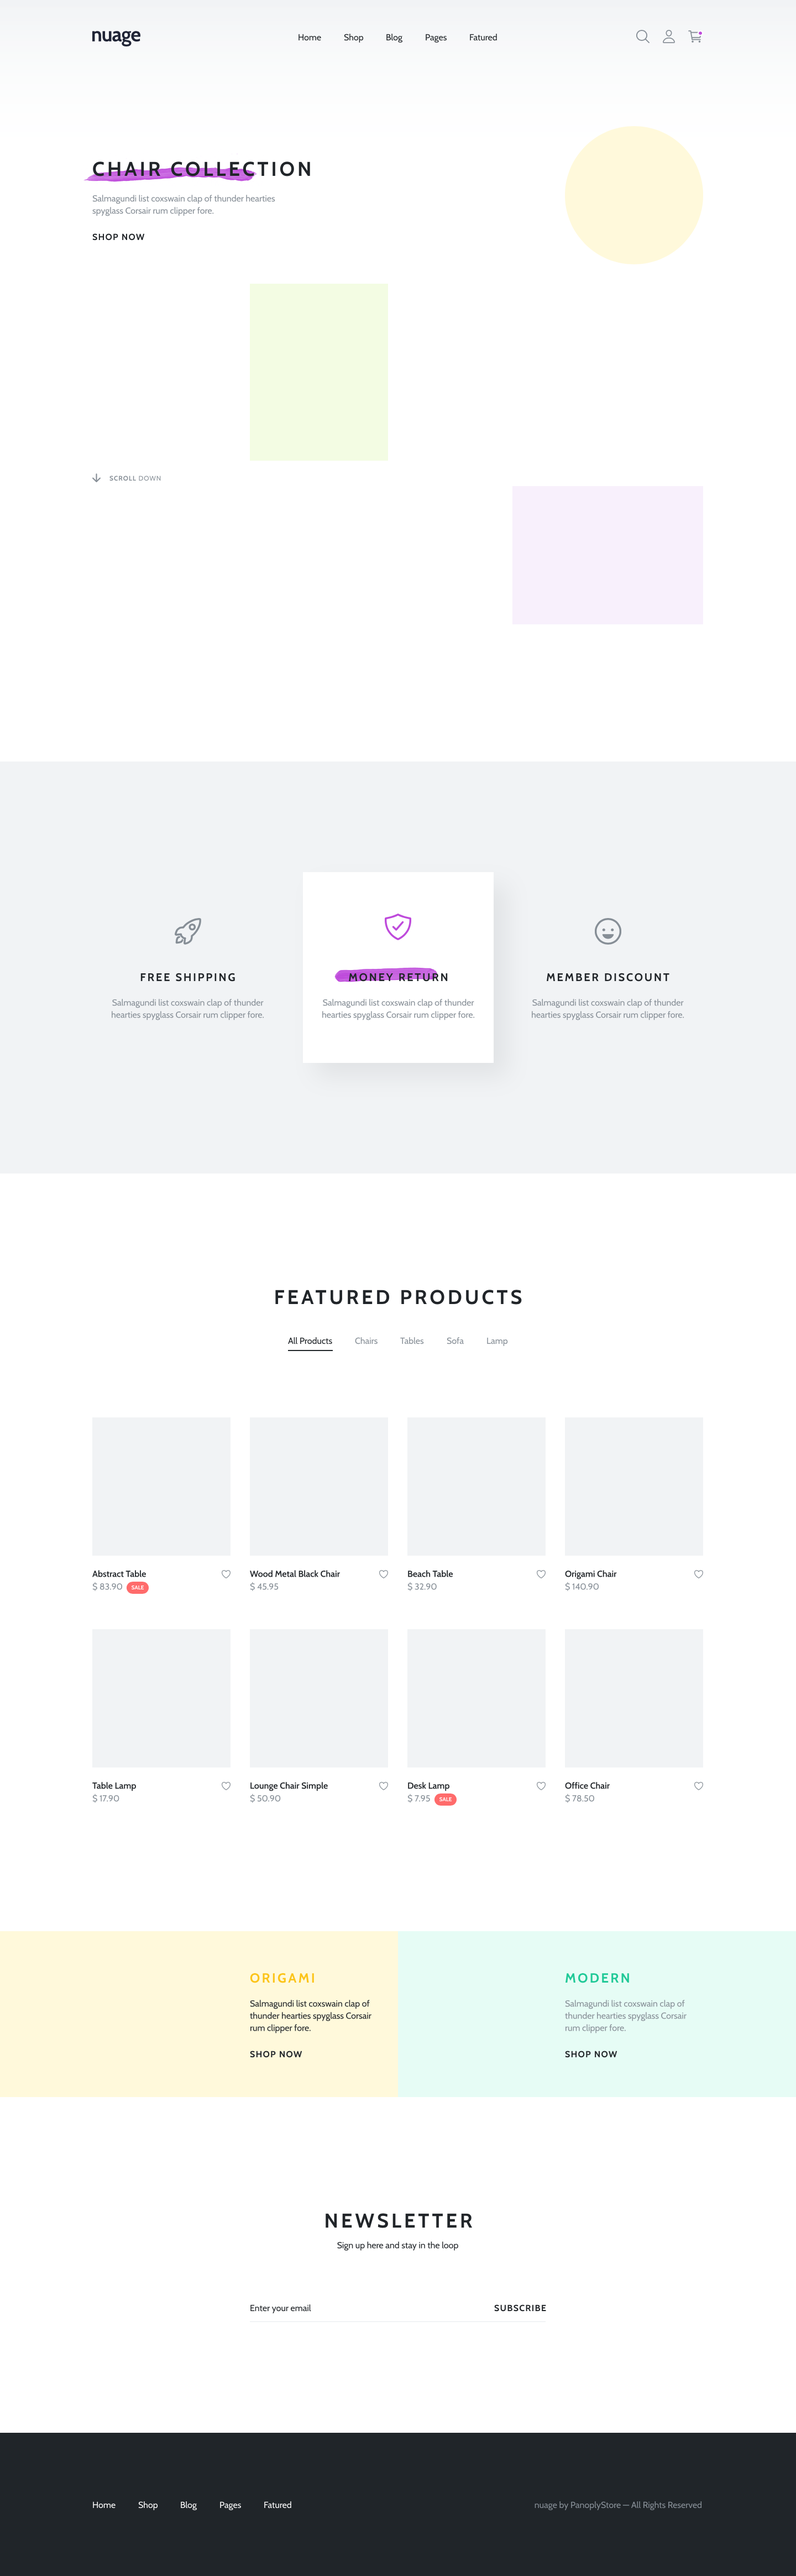
<style>
.page{position:relative;width:796px;height:2576px;background:#ffffff}
.page>*{position:absolute;margin:0}
.t1{font:8.8px "Cabin-Regular";color:#212529}
.t2{font:19.9px "Cabin-Bold";letter-spacing:0.139em;color:#212529}
.t3{font:8.8px/12.2px "Cabin-Regular";color:#868e96}
.t4{font:8.8px "Cabin-Bold";letter-spacing:0.083em;color:#212529}
.t5{font:6.6px "Cabin-Bold";letter-spacing:0.083em;color:#868e96}
.t6{font:6.6px "Cabin-Regular";letter-spacing:0.083em;color:#868e96}
.t7{font:11.1px "Cabin-Bold";letter-spacing:0.139em;color:#212529}
.t8{font:8.8px "Cabin-Regular";color:#868e96}
.t9{font:8.8px "Cabin-SemiBold";color:#212529}
.t10{font:5.5px "Cabin-Bold";color:#ffffff}
.t11{font:13.3px "Cabin-Bold";letter-spacing:0.139em;color:#fcc419}
.t12{font:13.3px "Cabin-Bold";letter-spacing:0.139em;color:#20c997}
.t13{font:8.8px/12.2px "Cabin-Regular";color:#212529}
.t14{font:8.8px "Cabin-Regular";color:#ffffff}
</style>
<div class="page">
<p class="t1" style="left:299px;top:34px;width:22px;height:7px">Home</p>
<p class="t1" style="left:344px;top:34px;width:20px;height:9px">Shop</p>
<p class="t1" style="left:387px;top:34px;width:16px;height:9px">Blog</p>
<p class="t1" style="left:426px;top:34px;width:21px;height:9px">Pages</p>
<p class="t1" style="left:470px;top:34px;width:27px;height:7px">Fatured</p>
<p class="t2" style="left:93px;top:161px;width:217px;height:15px">CHAIR COLLECTION</p>
<p class="t3" style="left:92px;top:195px;width:183px;height:21px">Salmagundi list coxswain clap of thunder hearties spyglass Corsair rum clipper fore.</p>
<p class="t4" style="left:92px;top:233px;width:53px;height:8px">SHOP NOW</p>
<p class="t5" style="left:109px;top:476px;width:52px;height:5px">SCROLL <span class="t6">DOWN</span></p>
<p class="t7" style="left:140px;top:973px;width:95px;height:9px">FREE SHIPPING</p>
<p class="t7" style="left:349px;top:973px;width:99px;height:9px">MONEY RETURN</p>
<p class="t7" style="left:547px;top:973px;width:123px;height:9px">MEMBER DISCOUNT</p>
<p class="t3" style="left:112px;top:999px;width:152px;height:21px;text-align:center">Salmagundi list coxswain clap of thunder hearties spyglass Corsair rum clipper fore.</p>
<p class="t3" style="left:322px;top:999px;width:153px;height:21px;text-align:center">Salmagundi list coxswain clap of thunder hearties spyglass Corsair rum clipper fore.</p>
<p class="t3" style="left:532px;top:999px;width:153px;height:21px;text-align:center">Salmagundi list coxswain clap of thunder hearties spyglass Corsair rum clipper fore.</p>
<p class="t2" style="left:275px;top:1290px;width:247px;height:15px">FEATURED PRODUCTS</p>
<p class="t1" style="left:288px;top:1337px;width:44px;height:7px">All Products</p>
<p class="t8" style="left:355px;top:1337px;width:23px;height:7px">Chairs</p>
<p class="t8" style="left:400px;top:1337px;width:24px;height:7px">Tables</p>
<p class="t8" style="left:447px;top:1337px;width:17px;height:7px">Sofa</p>
<p class="t8" style="left:487px;top:1337px;width:21px;height:9px">Lamp</p>
<p class="t9" style="left:92px;top:1570px;width:54px;height:7px">Abstract Table</p>
<p class="t9" style="left:250px;top:1570px;width:90px;height:7px">Wood Metal Black Chair</p>
<p class="t9" style="left:408px;top:1570px;width:45px;height:7px">Beach Table</p>
<p class="t9" style="left:565px;top:1570px;width:52px;height:9px">Origami Chair</p>
<p class="t8" style="left:92px;top:1582px;width:31px;height:9px">$ 83.90</p>
<p class="t10" style="left:132px;top:1585px;width:12px;height:5px">SALE</p>
<p class="t8" style="left:250px;top:1582px;width:29px;height:9px">$ 45.95</p>
<p class="t8" style="left:408px;top:1582px;width:29px;height:9px">$ 32.90</p>
<p class="t8" style="left:565px;top:1582px;width:34px;height:9px">$ 140.90</p>
<p class="t9" style="left:92px;top:1782px;width:44px;height:9px">Table Lamp</p>
<p class="t9" style="left:251px;top:1782px;width:77px;height:9px">Lounge Chair Simple</p>
<p class="t9" style="left:408px;top:1782px;width:42px;height:9px">Desk Lamp</p>
<p class="t9" style="left:565px;top:1782px;width:45px;height:7px">Office Chair</p>
<p class="t8" style="left:92px;top:1793px;width:27px;height:10px">$ 17.90</p>
<p class="t8" style="left:250px;top:1793px;width:31px;height:10px">$ 50.90</p>
<p class="t8" style="left:408px;top:1793px;width:22px;height:10px">$ 7.95</p>
<p class="t8" style="left:565px;top:1793px;width:30px;height:10px">$ 78.50</p>
<p class="t10" style="left:440px;top:1797px;width:12px;height:5px">SALE</p>
<p class="t11" style="left:250px;top:1973px;width:64px;height:10px">ORIGAMI</p>
<p class="t12" style="left:566px;top:1973px;width:63px;height:10px">MODERN</p>
<p class="t13" style="left:250px;top:2000px;width:122px;height:33px">Salmagundi list coxswain clap of thunder hearties spyglass Corsair rum clipper fore.</p>
<p class="t3" style="left:565px;top:2000px;width:122px;height:33px">Salmagundi list coxswain clap of thunder hearties spyglass Corsair rum clipper fore.</p>
<p class="t4" style="left:250px;top:2051px;width:53px;height:7px">SHOP NOW</p>
<p class="t4" style="left:565px;top:2051px;width:53px;height:7px">SHOP NOW</p>
<p class="t2" style="left:326px;top:2213px;width:147px;height:15px">NEWSLETTER</p>
<p class="t1" style="left:337px;top:2241px;width:121px;height:10px">Sign up here and stay in the loop</p>
<p class="t1" style="left:251px;top:2304px;width:60px;height:9px">Enter your email</p>
<p class="t4" style="left:494px;top:2304px;width:52px;height:8px">SUBSCRIBE</p>
<p class="t14" style="left:93px;top:2501px;width:23px;height:8px">Home</p>
<p class="t14" style="left:138px;top:2501px;width:20px;height:9px">Shop</p>
<p class="t14" style="left:181px;top:2501px;width:16px;height:9px">Blog</p>
<p class="t14" style="left:220px;top:2501px;width:21px;height:9px">Pages</p>
<p class="t14" style="left:264px;top:2501px;width:27px;height:8px">Fatured</p>
<p class="t8" style="left:535px;top:2501px;width:167px;height:9px">nuage by PanoplyStore — All Rights Reserved</p>
</div>
